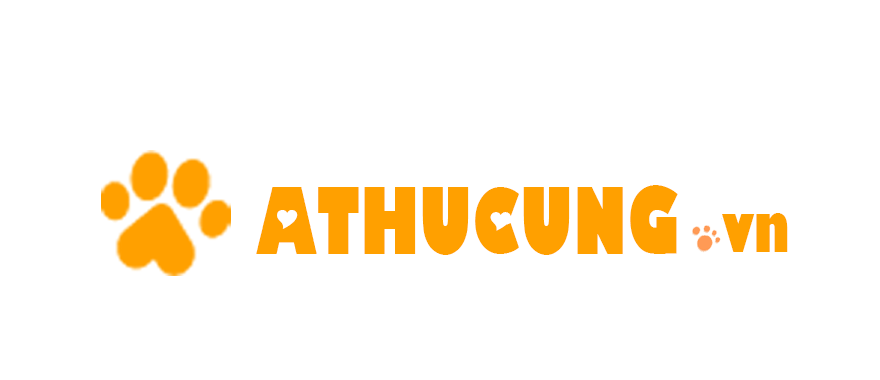
<style>
.page{position:relative;width:880px;height:380px;background:#ffffff}
.page>*{position:absolute;margin:0}
.t1{font:90px "SVN-HoleHearted";color:#ffa000}
.t2{font:65px "SVN-HoleHearted";color:#ffa000}
</style>
<div class="page">
<p class="t1" style="left:256px;top:185px;width:422px;height:70px">ATHUCUNG</p>
<p class="t2" style="left:722px;top:213px;width:66px;height:39px">vn</p>
</div>
